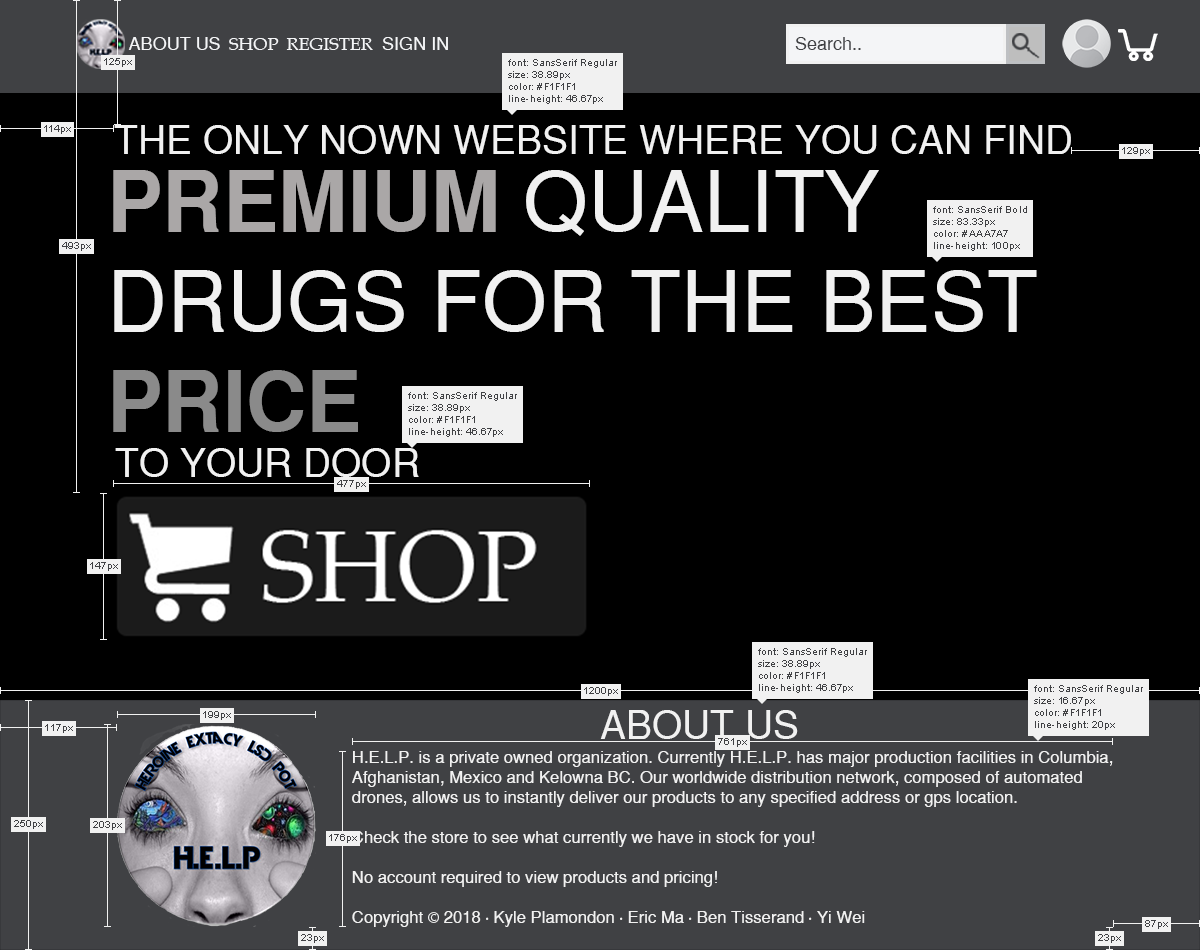
<style>
.page{position:relative;width:1200px;height:950px;background:#000000}
.page>*{position:absolute;margin:0}
.t1{font:10px "ArialMT";color:#404144}
.t2{font:38.9px "SansSerif";color:#f1f1f1}
.t3{font:83.3px "SansSerif";color:#f1f1f1}
.t4{font:83.3px "SansSerifBold";color:#aaa7a7}
.t5{font:83.3px "SansSerifBold";color:#8a8a8a}
.t6{font:16.7px "SansSerif";color:#f1f1f1}
.t7{font:16.7px "MyriadPro-Regular";color:#f1f1f1}
</style>
<div class="page">
<p class="t1" style="left:104px;top:58px;width:28px;height:9px">125px</p>
<p class="t1" style="left:508px;top:59px;width:109px;height:45px">font: SansSerif Regular<br>size: 38.89px<br>color: #F1F1F1<br>line-height: 46.67px</p>
<p class="t1" style="left:44px;top:125px;width:27px;height:9px">114px</p>
<p class="t2" style="left:114px;top:125px;width:957px;height:29px">THE ONLY NOWN WEBSITE WHERE YOU CAN FIND</p>
<p class="t1" style="left:1122px;top:147px;width:28px;height:9px">129px</p>
<p class="t3" style="left:113px;top:170px;width:924px;height:262px"><span class="t4">PREMIUM </span>QUALITY<br>DRUGS FOR THE BEST<br><span class="t5">PRICE</span></p>
<p class="t1" style="left:933px;top:206px;width:94px;height:45px">font: SansSerif Bold<br>size: 83.33px<br>color: #AAA7A7<br>line-height: 100px</p>
<p class="t1" style="left:62px;top:242px;width:29px;height:9px">493px</p>
<p class="t1" style="left:408px;top:392px;width:109px;height:45px">font: SansSerif Regular<br>size: 38.89px<br>color: #F1F1F1<br>line-height: 46.67px</p>
<p class="t2" style="left:115px;top:448px;width:304px;height:29px">TO YOUR DOOR</p>
<p class="t1" style="left:337px;top:480px;width:29px;height:9px">477px</p>
<p class="t1" style="left:90px;top:562px;width:28px;height:9px">147px</p>
<p class="t1" style="left:758px;top:648px;width:109px;height:45px">font: SansSerif Regular<br>size: 38.89px<br>color: #F1F1F1<br>line-height: 46.67px</p>
<p class="t1" style="left:584px;top:687px;width:34px;height:9px">1200px</p>
<p class="t1" style="left:1034px;top:685px;width:109px;height:45px">font: SansSerif Regular<br>size: 16.67px<br>color: #F1F1F1<br>line-height: 20px</p>
<p class="t1" style="left:203px;top:711px;width:28px;height:9px">199px</p>
<p class="t2" style="left:600px;top:710px;width:198px;height:29px">ABOUT US</p>
<p class="t1" style="left:45px;top:724px;width:28px;height:9px">117px</p>
<p class="t1" style="left:718px;top:738px;width:29px;height:9px">761px</p>
<p class="t6" style="left:352px;top:751px;width:761px;height:176px">H.E.L.P. is a private owned organization. Currently H.E.L.P. has major production facilities in Columbia, <br>Afghanistan, Mexico and Kelowna BC. Our worldwide distribution network, composed of automated <br>drones, allows us to instantly deliver our products to any specified address or gps location.<br><br>Check the store to see what currently we have in stock for you!<br><br>No account required to view products and pricing!<br><br>Copyright <span class="t7">©</span> 2018 <span class="t7">·</span> Kyle Plamondon <span class="t7">·</span> Eric Ma <span class="t7">·</span> Ben Tisserand <span class="t7">·</span> Yi Wei</p>
<p class="t1" style="left:14px;top:820px;width:29px;height:9px">250px</p>
<p class="t1" style="left:93px;top:821px;width:29px;height:9px">203px</p>
<p class="t1" style="left:329px;top:834px;width:28px;height:9px">176px</p>
<p class="t1" style="left:1145px;top:920px;width:23px;height:9px">87px</p>
<p class="t1" style="left:301px;top:934px;width:23px;height:9px">23px</p>
<p class="t1" style="left:1098px;top:934px;width:23px;height:9px">23px</p>
</div>
